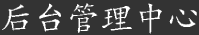
<style>
.page{position:relative;width:199px;height:35px;background:#333333}
.page>*{position:absolute;margin:0}
.t1{font:33.3px "¿¬Ìå";color:#ffffff}
</style>
<div class="page">
<p class="t1" style="left:2px;top:3px;width:195px;height:31px">后台管理中心</p>
</div>
